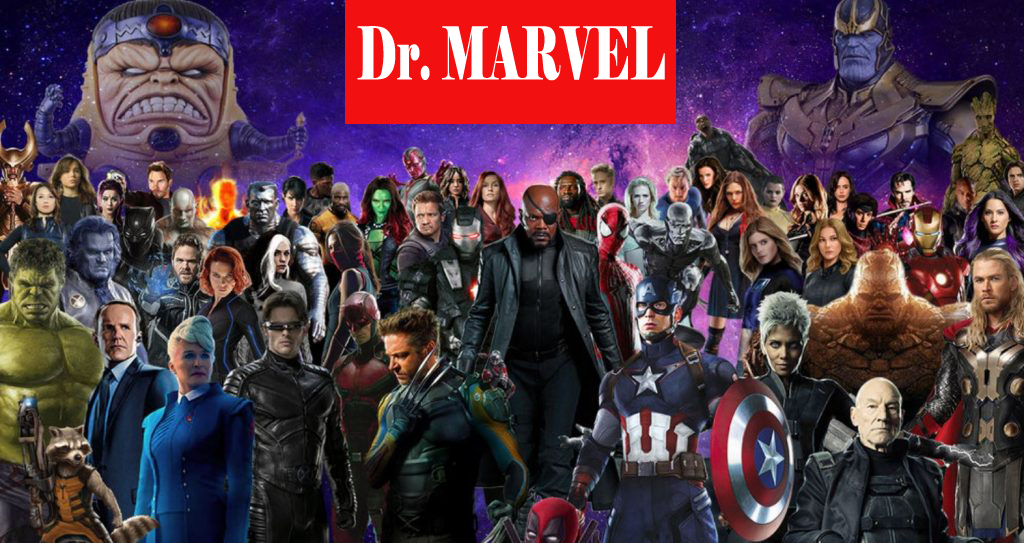
<style>
.page{position:relative;width:1024px;height:543px}
.page>*{position:absolute;margin:0}
.t1{font:72.7px "Elephant-Regular";color:#ffffff;scale:0.59 1}
</style>
<div class="page">
<p class="t1" style="left:357px;top:26px;width:308px;height:55px">Dr. MARVEL</p>
</div>
